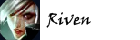
<style>
.page{position:relative;width:140px;height:40px;background:#ffffff}
.page>*{position:absolute;margin:0}
.t1{font:12px "VinerHandITC";color:#000000}
</style>
<div class="page">
<p class="t1" style="left:46px;top:12px;width:45px;height:16px">Riven</p>
</div>
